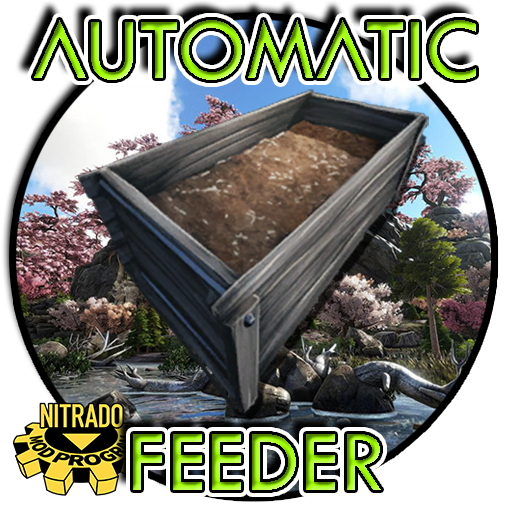
<style>
.page{position:relative;width:512px;height:512px;background:#ffffff}
.page>*{position:absolute;margin:0}
.t1{font:90px "ARK-Regular"}
</style>
<div class="page">
<p class="t1" style="left:34px;top:20px;width:442px;height:60px">AUTOMATIC</p>
<p class="t1" style="left:133px;top:434px;width:248px;height:56px">FEEDER</p>
</div>
